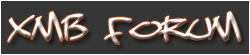
<style>
.page{position:relative;width:250px;height:55px;background:#373636}
.page>*{position:absolute;margin:0}
.t1{font:41px "DopeJam";text-transform:uppercase}
</style>
<div class="page">
<p class="t1" style="left:7px;top:11px;width:234px;height:34px">XMB Forum</p>
</div>
